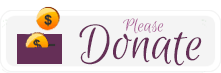
<style>
.page{position:relative;width:221px;height:73px;background:#f4f4f4}
.page>*{position:absolute;margin:0}
.t1{font:56px "EuphoriaScript-Regular";color:#652f57}
.t2{font:20px "EuphoriaScript-Regular";color:#a85a94}
</style>
<div class="page">
<p class="t1" style="left:79px;top:24px;width:123px;height:42px">Donate</p>
<p class="t2" style="left:123px;top:18px;width:41px;height:16px">Please</p>
</div>
